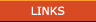
<style>
.page{position:relative;width:96px;height:22px;background:#d84a24}
.page>*{position:absolute;margin:0}
.t1{font:11px "Verdana";color:#ffffff}
</style>
<div class="page">
<p class="t1" style="left:31px;top:6px;width:34px;height:9px">LINKS</p>
</div>
